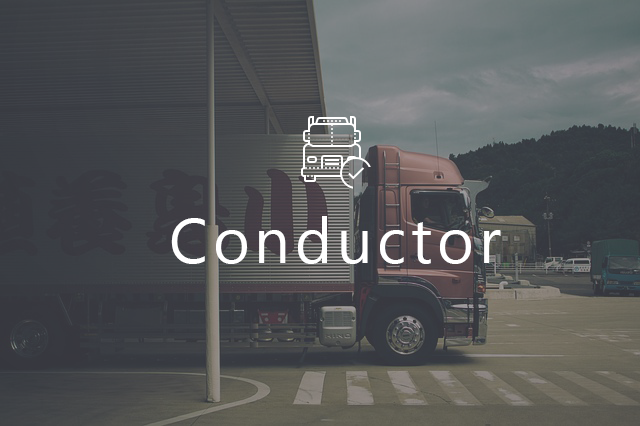
<style>
.page{position:relative;width:640px;height:426px}
.page>*{position:absolute;margin:0}
.t1{font:62.5px "MicrosoftTaiLe";letter-spacing:0.081em;color:#ffffff}
</style>
<div class="page">
<p class="t1" style="left:171px;top:216px;width:330px;height:48px">Conductor</p>
</div>
